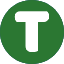
<style>
.page{position:relative;width:64px;height:64px;background:#2b7732}
.page>*{position:absolute;margin:0}
.t1{font:64px "Baloo";color:#ffffff}
</style>
<div class="page">
<p class="t1" style="left:14px;top:11px;width:36px;height:42px">T</p>
</div>
